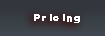
<style>
.page{position:relative;width:105px;height:36px;background:#33363d}
.page>*{position:absolute;margin:0}
.t1{font:10px "HeliosBlack";letter-spacing:0.14em;color:#ffffff}
</style>
<div class="page">
<p class="t1" style="left:34px;top:14px;width:46px;height:9px">Pricing</p>
</div>
